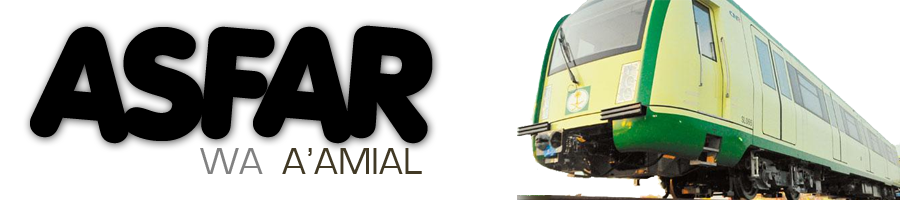
<style>
.page{position:relative;width:900px;height:200px;background:#ffffff}
.page>*{position:absolute;margin:0}
.t1{font:146px "Porkys";color:#000000}
.t2{font:39px "EurostileRegular";color:#413925}
.t3{font:39px "EurostileRegular";color:#818181}
</style>
<div class="page">
<p class="t1" style="left:30px;top:25px;width:403px;height:119px">ASFAR</p>
<p class="t2" style="left:200px;top:148px;width:222px;height:26px"><span class="t3">WA  </span>A’AMIAL</p>
</div>
